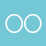
<style>
.page{position:relative;width:46px;height:46px;background:#74c7d5}
.page>*{position:absolute;margin:0}
.t1{font:26px "Raleway-Light";letter-spacing:-0.05em;color:#ffffff;font-variant:small-caps}
</style>
<div class="page">
<p class="t1" style="left:5px;top:14px;width:37px;height:19px">OO</p>
</div>
